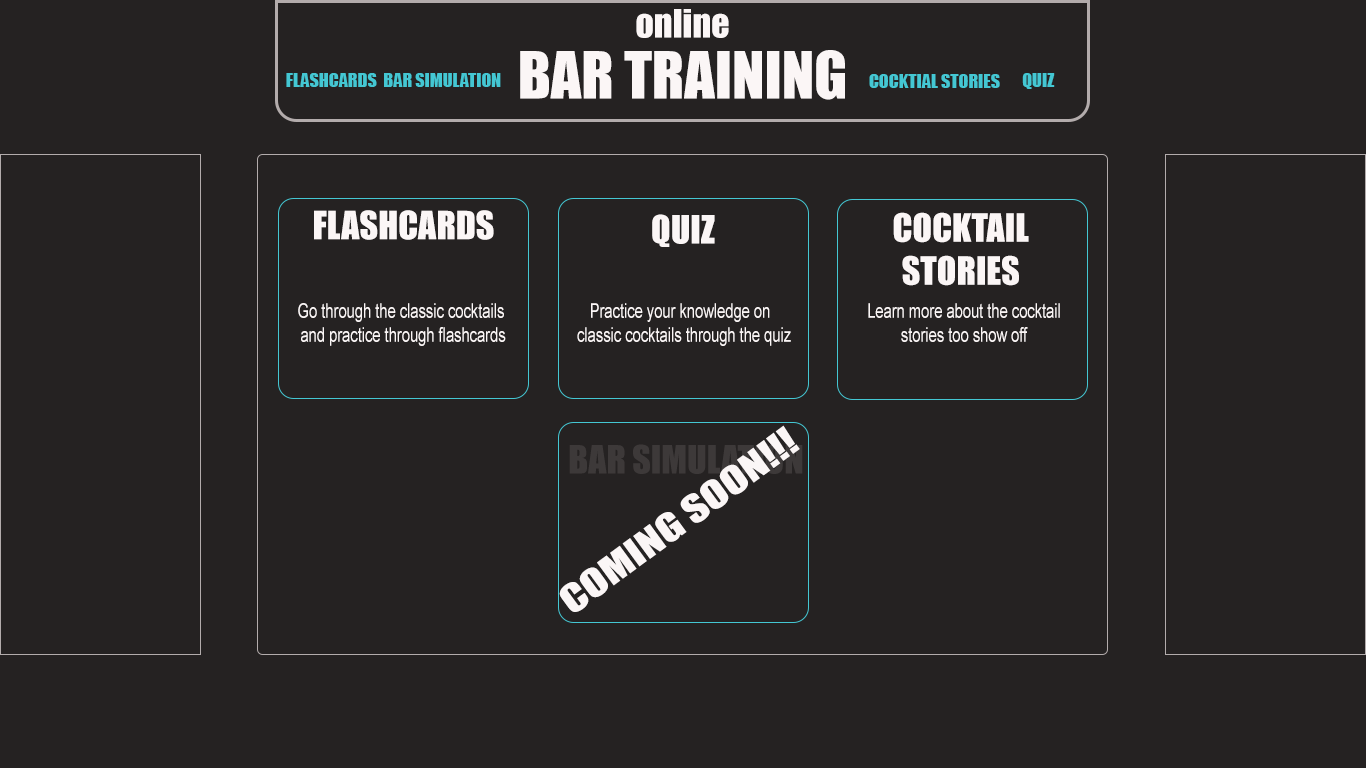
<style>
.page{position:relative;width:1366px;height:768px;background:#252222}
.page>*{position:absolute;margin:0}
.t1{font:36px "Impact";color:#fbf6f6}
.t2{font:60px "Impact";color:#fbf6f6}
.t3{font:18px "Impact";color:#44c7d3}
.t4{font:36px/100px "Impact";color:#fbf6f6}
.t5{font:20px "ArialMT";color:#fbf6f6;scale:0.73 1}
.t6{font:36px "Impact";color:#fbf6f6;scale:1.24 1}
</style>
<div class="page">
<p class="t1" style="left:636px;top:9px;width:93px;height:29px">online</p>
<p class="t2" style="left:520px;top:50px;width:325px;height:50px">BAR TRAINING</p>
<p class="t3" style="left:286px;top:73px;width:91px;height:14px">FLASHCARDS</p>
<p class="t3" style="left:384px;top:73px;width:117px;height:14px">BAR SIMULATION</p>
<p class="t3" style="left:869px;top:74px;width:131px;height:14px">COCKTIAL STORIES</p>
<p class="t3" style="left:1022px;top:73px;width:33px;height:16px">QUIZ</p>
<p class="t1" style="left:314px;top:210px;width:180px;height:30px">FLASHCARDS</p>
<p class="t1" style="left:652px;top:214px;width:63px;height:33px">QUIZ</p>
<p class="t4" style="left:893px;top:212px;width:136px;height:74px;text-align:center">COCKTAIL<span class="t1"><br>STORIES<br></span></p>
<p class="t5" style="left:298px;top:303px;width:208px;height:43px;text-align:center">Go through the classic cocktails <br>and practice through flashcards</p>
<p class="t5" style="left:577px;top:303px;width:214px;height:43px;text-align:center">Practice your knowledge on <br> classic cocktails through the quiz</p>
<p class="t5" style="left:868px;top:303px;width:192px;height:39px;text-align:center">Learn more about the cocktail<br>stories too show off</p>
<p class="t6" style="left:559px;top:425px;width:241px;height:187px;rotate:-36deg">COMING SOON!!!</p>
</div>
